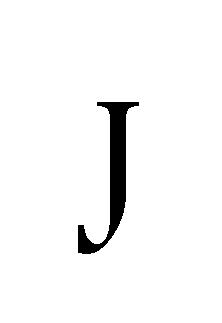
<style>
.page{position:relative;width:222px;height:323px;background:#ffffff}
.page>*{position:absolute;margin:0}
.t1{font:180px "FootlightMTLight";color:#000000}
</style>
<div class="page">
<p class="t1" style="left:78px;top:102px;width:61px;height:152px">J</p>
</div>
